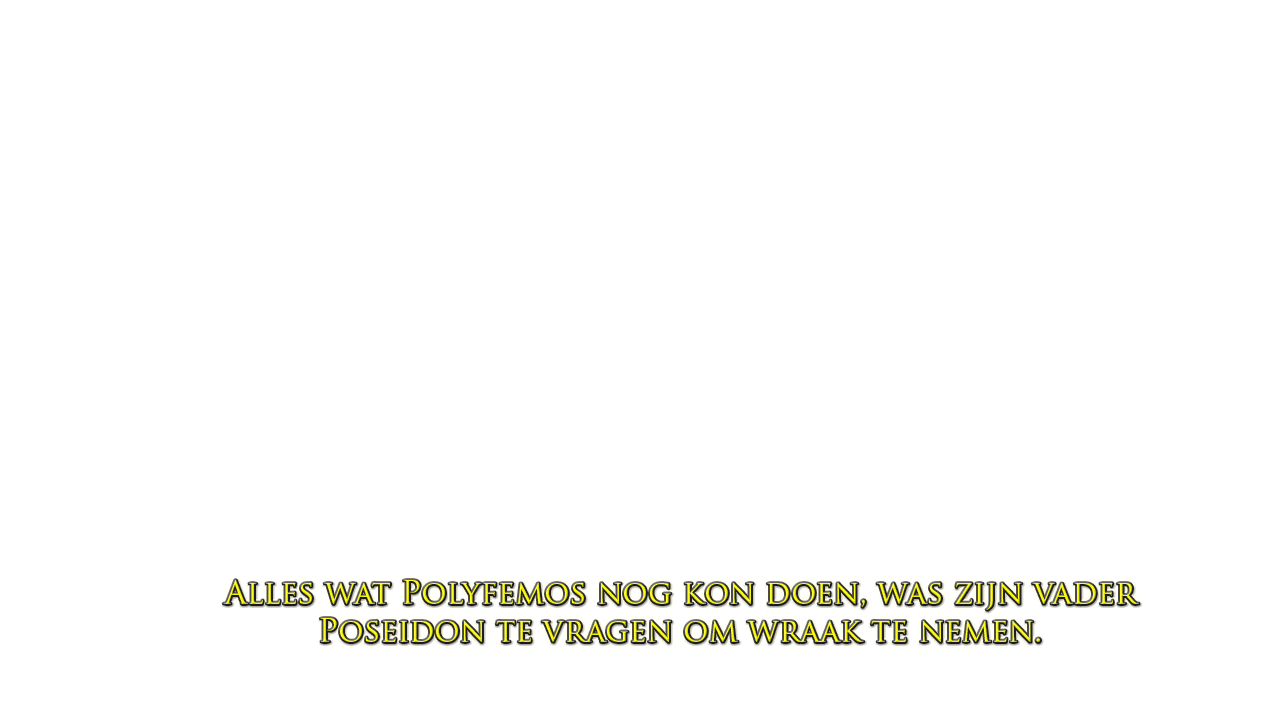
<style>
.page{position:relative;width:1280px;height:720px;background:#ffffff}
.page>*{position:absolute;margin:0}
.t1{font:31.7px "TrajanPro-Regular";color:#fffc14}
</style>
<div class="page">
<p class="t1" style="left:223px;top:580px;width:916px;height:63px;text-align:center">Alles wat Polyfemos nog kon doen, was zijn vader <br>Poseidon te vragen om wraak te nemen.</p>
</div>
